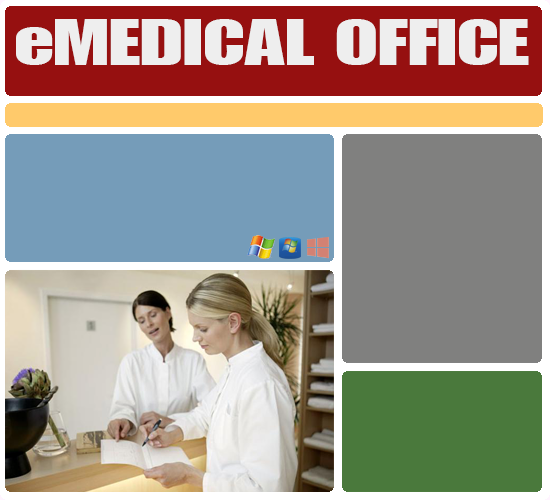
<style>
.page{position:relative;width:550px;height:500px}
.page>*{position:absolute;margin:0}
.t1{font:62.3px "GENUINE";color:#eeeeee;scale:1.42 1}
</style>
<div class="page">
<p class="t1" style="left:16px;top:19px;width:513px;height:46px">eMEDICAL OFFICE</p>
</div>
